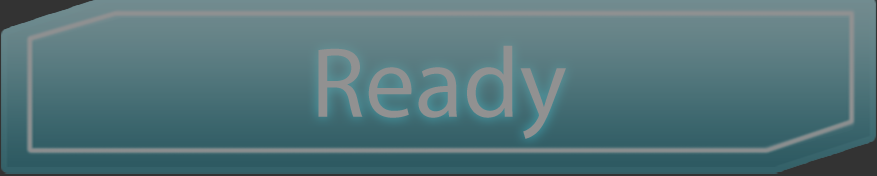
<style>
.page{position:relative;width:877px;height:176px}
.page>*{position:absolute;margin:0}
.t1{font:100px "MyriadPro-Regular";color:#919191}
</style>
<div class="page">
<p class="t1" style="left:318px;top:45px;width:248px;height:94px">Ready</p>
</div>
